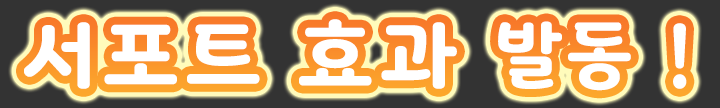
<style>
.page{position:relative;width:720px;height:108px;background:#333333}
.page>*{position:absolute;margin:0}
.t1{font:80px "Binggrae-Bold";letter-spacing:0.05em;color:#ffffff;text-transform:uppercase}
.t2{font:69.3px "Binggrae-Bold";letter-spacing:0.05em;color:#ffffff;text-transform:uppercase}
.t3{font:79.2px "Binggrae-Bold";letter-spacing:0.05em;color:#ffffff;text-transform:uppercase;scale:0.91 1}
</style>
<div class="page">
<p class="t1" style="left:24px;top:19px;width:433px;height:70px">서포트 효과</p>
<p class="t2" style="left:498px;top:21px;width:133px;height:70px">발동</p>
<p class="t3" style="left:673px;top:23px;width:14px;height:66px">!</p>
</div>
